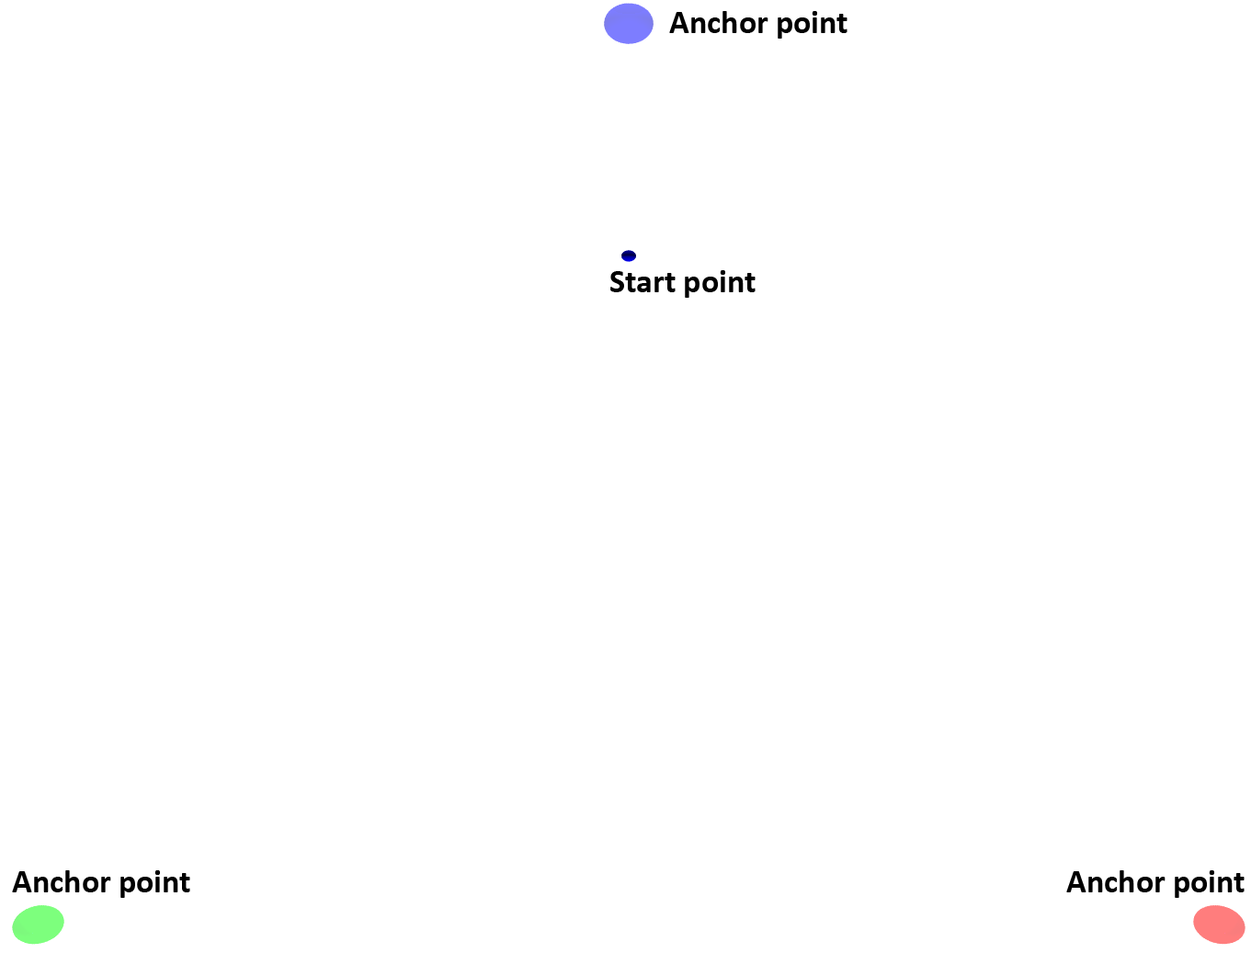
<style>
.page{position:relative;width:1251px;height:953px;background:#ffffff}
.page>*{position:absolute;margin:0}
.t1{font:33.1px "Calibri-Bold";color:#000000}
</style>
<div class="page">
<p class="t1" style="left:669px;top:11px;width:178px;height:28px">Anchor point</p>
<p class="t1" style="left:610px;top:270px;width:146px;height:28px">Start point</p>
<p class="t1" style="left:12px;top:870px;width:178px;height:28px">Anchor point</p>
<p class="t1" style="left:1066px;top:870px;width:179px;height:28px">Anchor point</p>
</div>
